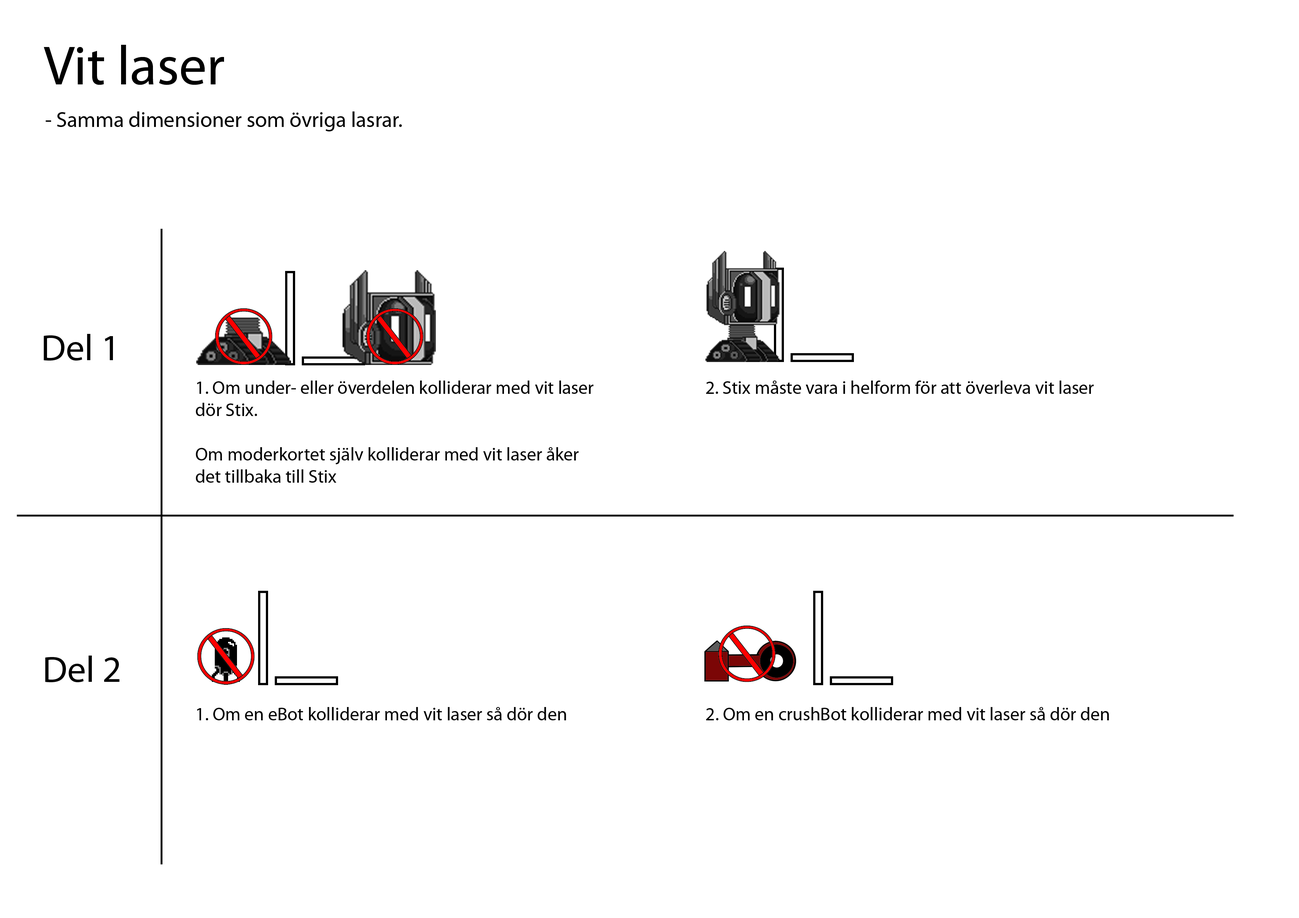
<style>
.page{position:relative;width:1299px;height:918px;background:#ffffff}
.page>*{position:absolute;margin:0}
.t1{font:55.5px "MyriadPro-Regular";color:#000000}
.t2{font:21.6px "MyriadPro-Regular";color:#000000}
.t3{font:37px "MyriadPro-Regular";color:#000000}
.t4{font:18.5px "MyriadPro-Regular";color:#000000}
</style>
<div class="page">
<p class="t1" style="left:44px;top:45px;width:180px;height:40px">Vit laser</p>
<p class="t2" style="left:46px;top:111px;width:356px;height:20px">- Samma dimensioner som övriga lasrar.</p>
<p class="t3" style="left:44px;top:334px;width:69px;height:27px">Del 1</p>
<p class="t4" style="left:196px;top:381px;width:397px;height:102px">1. Om under- eller överdelen kolliderar med vit laser<br>dör Stix.<br><br>Om moderkortet själv kolliderar med vit laser åker<br>det tillbaka till Stix</p>
<p class="t4" style="left:706px;top:381px;width:388px;height:13px">2. Stix måste vara i helform för att överleva vit laser</p>
<p class="t3" style="left:45px;top:656px;width:75px;height:26px">Del 2</p>
<p class="t4" style="left:197px;top:707px;width:369px;height:13px">1. Om en eBot kolliderar med vit laser så dör den</p>
<p class="t4" style="left:706px;top:707px;width:403px;height:13px">2. Om en crushBot kolliderar med vit laser så dör den</p>
</div>
